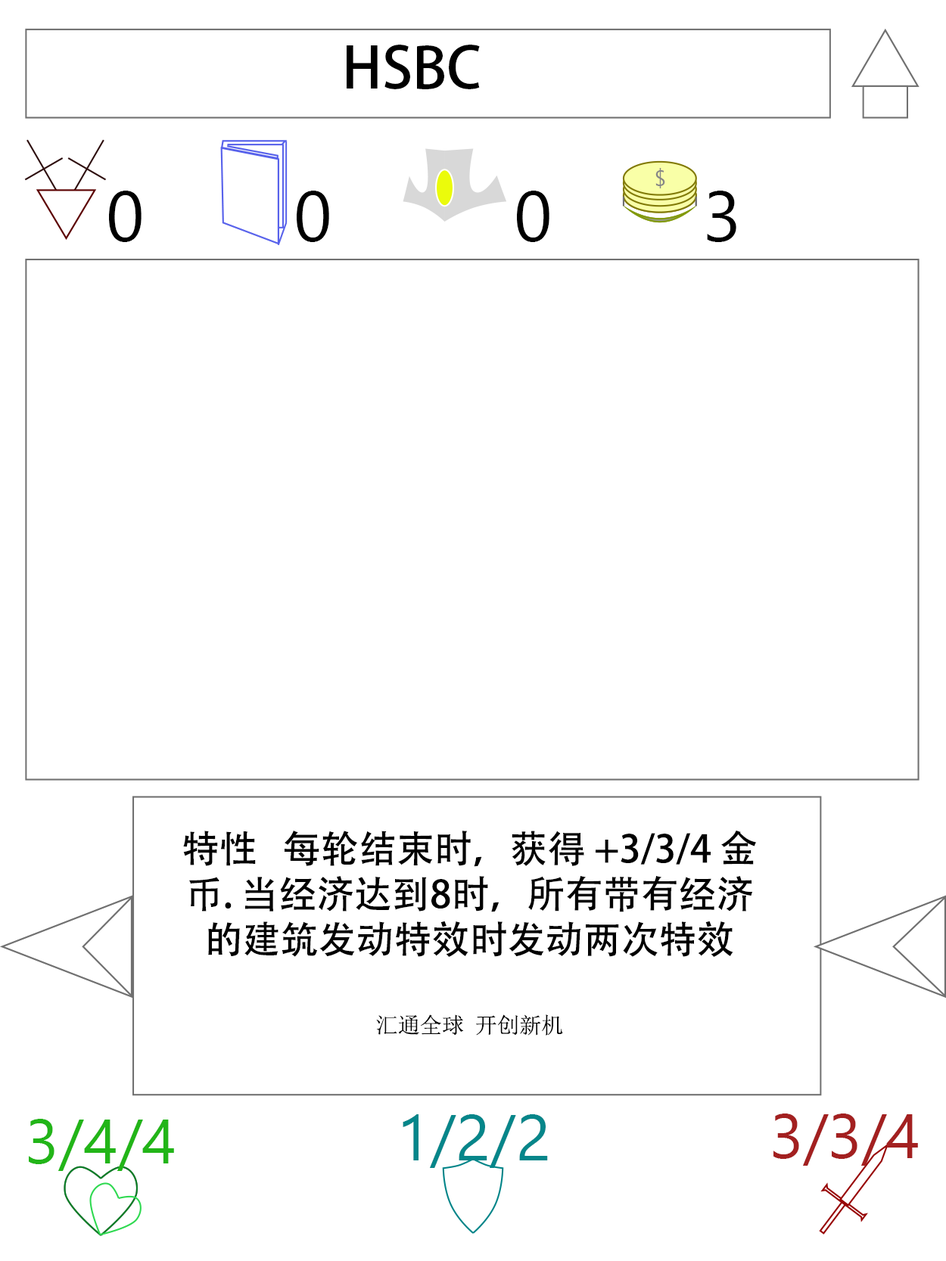
<style>
.page{position:relative;width:946px;height:1261px;background:#ffffff}
.page>*{position:absolute;margin:0}
.t1{font:56.7px "AdobeHeitiStd-Regular";color:#000000}
.t2{font:70.9px "SegoeUI";color:#000000}
.t3{font:37.8px "AdobeHeitiStd-Regular";color:#000000}
.t4{font:22.1px "SimSun";color:#000000}
.t5{font:63px "SegoeUI";color:#22b518}
.t6{font:64.6px "SegoeUI";color:#05868a}
.t7{font:63px "SegoeUI";color:#a32020}
</style>
<div class="page">
<p class="t1" style="left:346px;top:45px;width:134px;height:44px">HSBC</p>
<p class="t2" style="left:109px;top:191px;width:32px;height:51px">0</p>
<p class="t2" style="left:297px;top:191px;width:32px;height:51px">0</p>
<p class="t2" style="left:517px;top:191px;width:32px;height:51px">0</p>
<p class="t2" style="left:707px;top:191px;width:29px;height:51px">3</p>
<p class="t3" style="left:183px;top:830px;width:573px;height:206px;text-align:center">特性   每轮结束时，获得 +3/3/4 金币. 当经济达到8时，所有带有经济的建筑发动特效时发动两次特效<br><br><span class="t4"><br>汇通全球 开创新机</span></p>
<p class="t5" style="left:29px;top:1119px;width:145px;height:52px">3/4/4</p>
<p class="t6" style="left:402px;top:1114px;width:146px;height:54px">1/2/2</p>
<p class="t7" style="left:773px;top:1114px;width:145px;height:52px">3/3/4</p>
</div>
